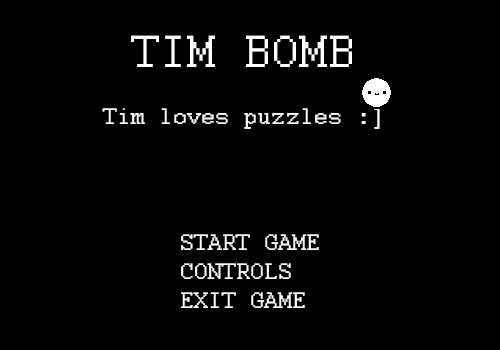
<style>
.page{position:relative;width:500px;height:350px;background:#000000}
.page>*{position:absolute;margin:0}
.t1{font:12px "Courier";color:#ffffff}
.t2{font:25px "Courier";color:#ffffff}
</style>
<div class="page">
<p class="t1" style="left:131px;top:35px;width:221px;height:32px">TIM BOMB</p>
<p class="t2" style="left:102px;top:108px;width:278px;height:21px">Tim loves puzzles :]</p>
<p class="t2" style="left:181px;top:234px;width:138px;height:16px">START GAME</p>
<p class="t2" style="left:181px;top:263px;width:110px;height:16px">CONTROLS</p>
<p class="t2" style="left:181px;top:292px;width:124px;height:16px">EXIT GAME</p>
</div>
